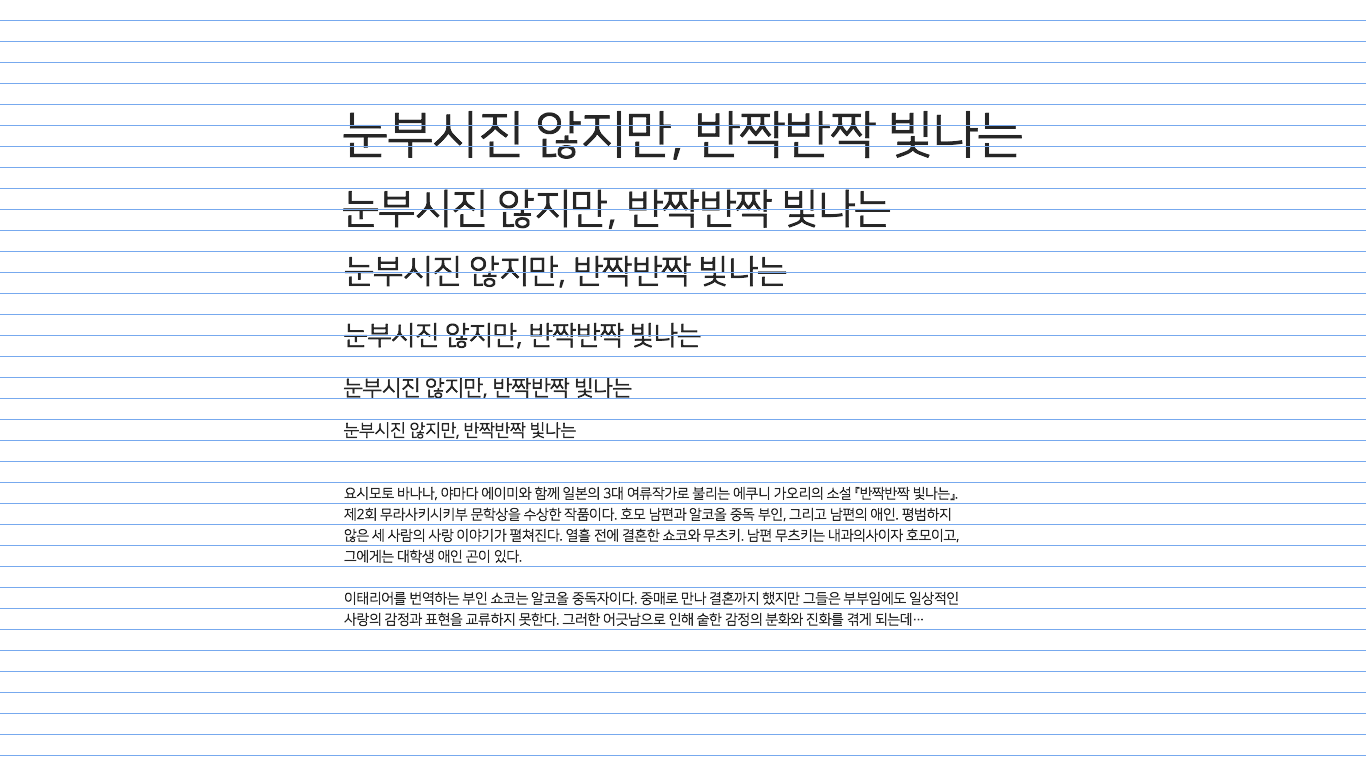
<style>
.page{position:relative;width:1366px;height:768px;background:#ffffff}
.page>*{position:absolute;margin:0}
.t1{font:50.9px "NanumSquareOTFR";letter-spacing:-0.02em;color:#262626}
.t2{font:41.1px "NanumSquareOTFR";letter-spacing:-0.02em;color:#262626}
.t3{font:33.1px "NanumSquareOTFR";letter-spacing:-0.02em;color:#262626}
.t4{font:26.7px "NanumSquareOTFR";letter-spacing:-0.02em;color:#262626}
.t5{font:21.5px "NanumSquareOTFR";letter-spacing:-0.02em;color:#262626}
.t6{font:17.4px "NanumSquareOTFR";letter-spacing:-0.02em;color:#262626}
.t7{font:14px "NanumSquareOTFR";letter-spacing:-0.02em;color:#262626}
</style>
<div class="page">
<p class="t1" style="left:343px;top:110px;width:679px;height:50px">눈부시진 않지만, 반짝반짝 빛나는</p>
<p class="t2" style="left:343px;top:189px;width:548px;height:41px">눈부시진 않지만, 반짝반짝 빛나는</p>
<p class="t3" style="left:344px;top:255px;width:443px;height:33px">눈부시진 않지만, 반짝반짝 빛나는</p>
<p class="t4" style="left:344px;top:322px;width:357px;height:27px">눈부시진 않지만, 반짝반짝 빛나는</p>
<p class="t5" style="left:343px;top:377px;width:289px;height:22px">눈부시진 않지만, 반짝반짝 빛나는</p>
<p class="t6" style="left:343px;top:422px;width:233px;height:17px">눈부시진 않지만, 반짝반짝 빛나는</p>
<p class="t7" style="left:344px;top:486px;width:615px;height:141px">요시모토 바나나, 야마다 에이미와 함께 일본의 3대 여류작가로 불리는 에쿠니 가오리의 소설 『반짝반짝 빛나는』. 제2회 무라사키시키부 문학상을 수상한 작품이다. 호모 남편과 알코올 중독 부인, 그리고 남편의 애인. 평범하지 않은 세 사람의 사랑 이야기가 펼쳐진다. 열흘 전에 결혼한 쇼코와 무츠키. 남편 무츠키는 내과의사이자 호모이고, 그에게는 대학생 애인 곤이 있다. <br>이태리어를 번역하는 부인 쇼코는 알코올 중독자이다. 중매로 만나 결혼까지 했지만 그들은 부부임에도 일상적인 사랑의 감정과 표현을 교류하지 못한다. 그러한 어긋남으로 인해 숱한 감정의 분화와 진화를 겪게 되는데…</p>
</div>
